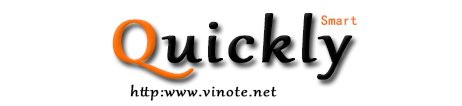
<style>
.page{position:relative;width:462px;height:106px;background:#ffffff}
.page>*{position:absolute;margin:0}
.t1{font:72.6px "Gabriola";letter-spacing:0.04em;color:#000000;font-weight:bold;scale:1.19 1}
.t2{font:72.6px "Gabriola";letter-spacing:0.04em;color:#ff6d02;font-weight:bold;scale:1.19 1}
.t3{font:13.7px "¿¬Ìå";letter-spacing:0.04em;color:#f86a02}
.t4{font:16.9px "Gabriola";letter-spacing:0.04em;color:#000000;font-weight:bold;scale:1.19 1}
</style>
<div class="page">
<p class="t1" style="left:112px;top:13px;width:241px;height:67px"><span class="t2">Q</span>uickly</p>
<p class="t3" style="left:321px;top:15px;width:36px;height:10px">Smart</p>
<p class="t4" style="left:130px;top:84px;width:147px;height:17px">http:www.vinote.net</p>
</div>
